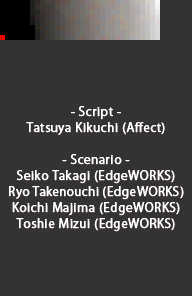
<style>
.page{position:relative;width:192px;height:296px;background:#333333}
.page>*{position:absolute;margin:0}
.t1{font:12px/16px "KozGoPr6N-Regular";letter-spacing:0.025em;color:#ffffff;font-weight:bold}
.t2{font:12px/16px "KozGoPr6N-Regular";letter-spacing:0.01em;color:#ffffff;font-weight:bold}
</style>
<div class="page">
<p class="t1" style="left:9px;top:106px;width:175px;height:126px;text-align:center">- Script -<br>Tatsuya Kikuchi (Affect)<br><br>- Scenario -<br>Seiko Takagi (EdgeWORKS)<br><span class="t2">Ryo Takenouchi</span> (EdgeWORKS)<br>Koichi Majima (EdgeWORKS)<br>Toshie Mizui (EdgeWORKS)</p>
</div>
